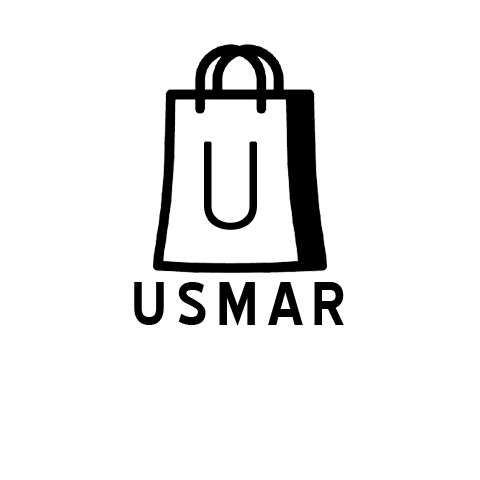
<style>
.page{position:relative;width:480px;height:480px;background:#ffffff}
.page>*{position:absolute;margin:0}
.t1{font:121.9px "advent-Lt1";letter-spacing:0.12em;color:#000000}
.t2{font:73.6px "BlueHighway-Bold";letter-spacing:0.12em;color:#000000}
</style>
<div class="page">
<p class="t1" style="left:205px;top:142px;width:51px;height:87px">U</p>
<p class="t2" style="left:134px;top:282px;width:210px;height:44px">USMAR</p>
</div>
